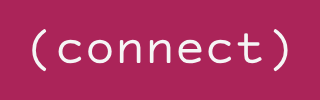
<style>
.page{position:relative;width:320px;height:100px;background:#ab2459}
.page>*{position:absolute;margin:0}
.t1{font:50px "CourierPrimeCode-Regular";color:#f5f5f5}
</style>
<div class="page">
<p class="t1" style="left:32px;top:29px;width:256px;height:43px">(connect)</p>
</div>
